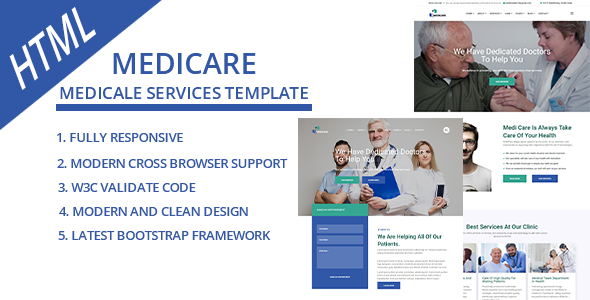
<style>
.page{position:relative;width:590px;height:300px;background:#ffffff}
.page>*{position:absolute;margin:0}
.t1{font:50.3px "OpenSans-Semibold";color:#ffffff;scale:0.69 1}
.t2{font:29.2px "OpenSans-Semibold";color:#3158a7}
.t3{font:16.7px "OpenSans-Semibold";color:#3158a7}
.t4{font:12.5px "OpenSans-Semibold";color:#3158a7}
</style>
<div class="page">
<p class="t1" style="left:9px;top:7px;width:87px;height:83px;rotate:-38deg">HTML</p>
<p class="t2" style="left:113px;top:53px;width:143px;height:21px">MEDICARE</p>
<p class="t3" style="left:60px;top:87px;width:248px;height:12px">MEDICALE SERVICES TEMPLATE</p>
<p class="t4" style="left:57px;top:133px;width:126px;height:9px">1. FULLY RESPONSIVE</p>
<p class="t4" style="left:57px;top:159px;width:231px;height:9px">2. MODERN CROSS BROWSER SUPPORT</p>
<p class="t4" style="left:58px;top:183px;width:138px;height:9px">3. W3C VALIDATE CODE</p>
<p class="t4" style="left:59px;top:207px;width:189px;height:9px">4. MODERN AND CLEAN DESIGN</p>
<p class="t4" style="left:58px;top:231px;width:213px;height:9px">5. LATEST BOOTSTRAP FRAMEWORK</p>
</div>
